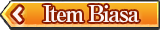
<style>
.page{position:relative;width:160px;height:30px}
.page>*{position:absolute;margin:0}
.t1{font:22px "RyuminPro-ExBold";letter-spacing:-0.08em;color:#fff6f3}
</style>
<div class="page">
<p class="t1" style="left:43px;top:5px;width:97px;height:18px">Item Biasa</p>
</div>
